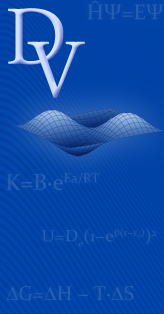
<style>
.page{position:relative;width:164px;height:314px}
.page>*{position:absolute;margin:0}
.t1{font:21.4px "Constantia";color:#255db4}
.t2{font:117.1px "DaunPenh";color:#ccdafd}
.t3{font:22.9px "Constantia";color:#2560b5}
.t4{font:16.3px "Constantia";color:#255eb4;scale:1.1 1}
.t5{font:16.3px "SymbolMT";color:#255eb4;scale:1.1 1}
.t6{font:10.9px "Constantia";color:#255eb4;scale:1.1 1}
.t7{font:34.8px "Constantia";color:#255fb4}
.t8{font:34.8px "SymbolMT";color:#255fb4}
</style>
<div class="page">
<p class="t1" style="left:87px;top:0px;width:77px;height:20px">ĤΨ=EΨ</p>
<p class="t2" style="left:8px;top:8px;width:56px;height:57px">D</p>
<p class="t2" style="left:27px;top:41px;width:58px;height:57px">V</p>
<p class="t3" style="left:6px;top:173px;width:94px;height:17px">K=B∙eEa/RT</p>
<p class="t4" style="left:42px;top:228px;width:115px;height:19px">U=De(1−e<span class="t5">b</span>(r−r<span class="t6">0</span>))2</p>
<p class="t7" style="left:6px;top:286px;width:128px;height:15px"><span class="t8">D</span>G=<span class="t8">D</span>H − T∙<span class="t8">D</span>S</p>
</div>
